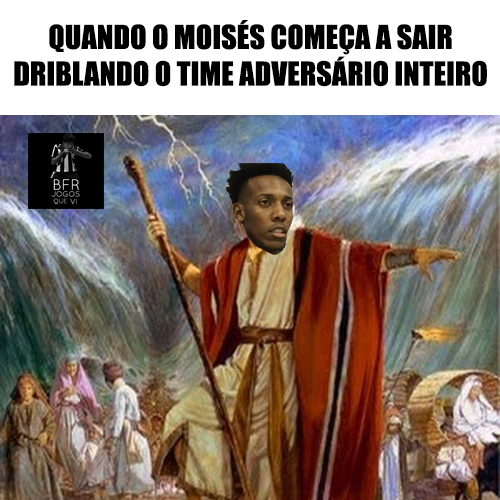
<style>
.page{position:relative;width:500px;height:500px}
.page>*{position:absolute;margin:0}
.t1{font:30.5px "Impact";color:#000000}
</style>
<div class="page">
<p class="t1" style="left:14px;top:20px;width:473px;height:67px;text-align:center">QUANDO O MOISÉS COMEÇA A SAIR <br>DRIBLANDO O TIME ADVERSÁRIO INTEIRO</p>
</div>
